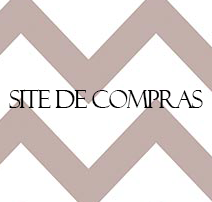
<style>
.page{position:relative;width:212px;height:202px;background:#ffffff}
.page>*{position:absolute;margin:0}
.t1{font:24px "FelixTitlingMT";letter-spacing:-0.05em;color:#000000}
</style>
<div class="page">
<p class="t1" style="left:9px;top:89px;width:194px;height:19px">site de compras</p>
</div>
